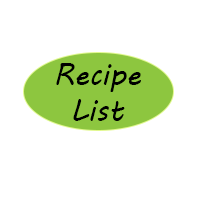
<style>
.page{position:relative;width:200px;height:200px;background:#ffffff}
.page>*{position:absolute;margin:0}
.t1{font:30px "MVBoli";color:#000000}
</style>
<div class="page">
<p class="t1" style="left:56px;top:63px;width:85px;height:58px;text-align:center">Recipe List</p>
</div>
